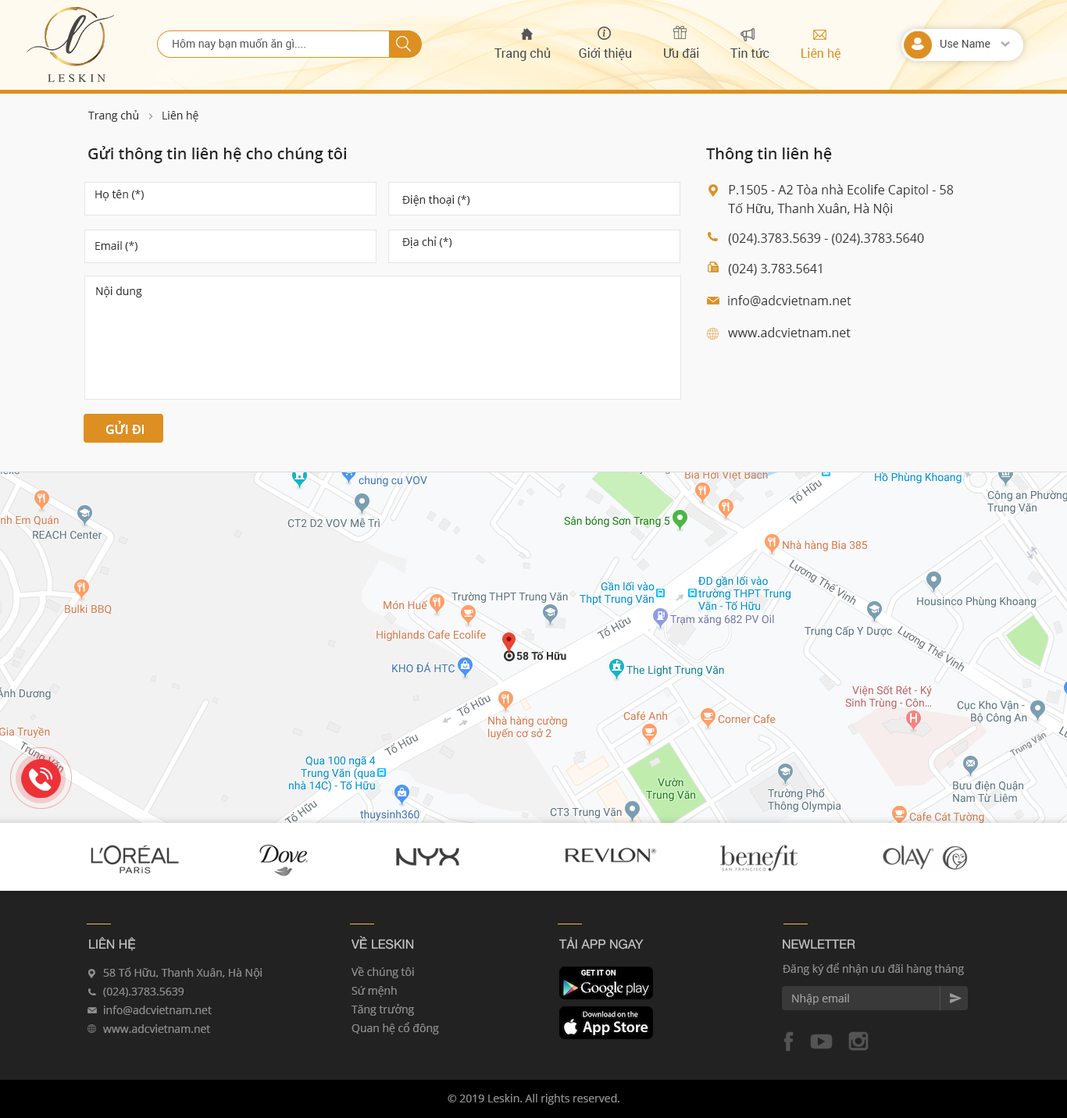
<style>
.page{position:relative;width:1067px;height:1118px;background:#f9f9f9}
.page>*{position:absolute;margin:0}
.t1{font:10.9px "Roboto-Regular";color:#595959}
.t2{font:10.9px "Roboto-Regular";color:#464646}
.t3{font:12.5px "Roboto-Regular";color:#464646}
.t4{font:12.5px "Roboto-Regular";color:#dd8f22}
.t5{font:10.9px "OpenSans";color:#333333}
.t6{font:15.6px "OpenSans-Semibold";color:#252525}
.t7{font:12.5px/18.7px "OpenSans";color:#333333}
.t8{font:12.5px "OpenSans";color:#333333}
.t9{font:12.5px "OpenSans-Semibold";color:#ffffff;text-transform:uppercase}
.t10{font:12.5px "HelveticaNeue";color:#c4c4c4;text-transform:uppercase}
.t11{font:10.9px "OpenSans";color:#8c8c8c}
.t12{font:10.9px/18.7px "OpenSans";color:#8c8c8c}
.t13{font:10.9px "OpenSans";color:#9c9c9c}
</style>
<div class="page">
<p class="t1" style="left:173px;top:38px;width:132px;height:12px">Hôm nay bạn muốn ăn gì....</p>
<p class="t2" style="left:939px;top:40px;width:51px;height:8px">Use Name</p>
<p class="t3" style="left:494px;top:48px;width:346px;height:13px">Trang chủ         Giới thiệu          Ưu đãi          Tin tức          <span class="t4">Liên hệ</span></p>
<p class="t5" style="left:88px;top:110px;width:110px;height:12px">Trang chủ        Liên hệ</p>
<p class="t6" style="left:88px;top:146px;width:259px;height:17px">Gửi thông tin liên hệ cho chúng tôi</p>
<p class="t6" style="left:706px;top:148px;width:126px;height:15px">Thông tin liên hệ</p>
<p class="t7" style="left:728px;top:184px;width:225px;height:31px">P.1505 - A2 Tòa nhà Ecolife Capitol - 58 Tố Hữu, Thanh Xuân, Hà Nội</p>
<p class="t5" style="left:95px;top:190px;width:49px;height:11px">Họ tên (*)</p>
<p class="t5" style="left:402px;top:195px;width:68px;height:11px">Điện thoại (*)</p>
<p class="t8" style="left:728px;top:233px;width:196px;height:12px">(024).3783.5639 - (024).3783.5640</p>
<p class="t5" style="left:95px;top:241px;width:42px;height:10px">Email (*)</p>
<p class="t5" style="left:402px;top:237px;width:50px;height:11px">Địa chỉ (*)</p>
<p class="t8" style="left:728px;top:264px;width:93px;height:12px">(024) 3.783.5641</p>
<p class="t5" style="left:96px;top:287px;width:46px;height:10px">Nội dung</p>
<p class="t8" style="left:728px;top:295px;width:123px;height:11px">info@adcvietnam.net</p>
<p class="t8" style="left:728px;top:327px;width:122px;height:10px">www.adcvietnam.net</p>
<p class="t9" style="left:105px;top:421px;width:39px;height:13px">Gửi đi</p>
<p class="t10" style="left:89px;top:937px;width:47px;height:14px">Liên hệ</p>
<p class="t10" style="left:351px;top:935px;width:63px;height:14px">về leskin</p>
<p class="t10" style="left:559px;top:937px;width:84px;height:12px">Tải App ngay</p>
<p class="t10" style="left:782px;top:939px;width:73px;height:10px">newletter</p>
<p class="t11" style="left:782px;top:963px;width:181px;height:12px">Đăng ký để nhận ưu đãi hàng tháng</p>
<p class="t12" style="left:103px;top:967px;width:159px;height:66px">58 Tố Hữu, Thanh Xuân, Hà Nội<br>(024).3783.5639<br>info@adcvietnam.net <br>www.adcvietnam.net</p>
<p class="t12" style="left:351px;top:967px;width:88px;height:68px">Về chúng tôi<br>Sứ mệnh<br>Tăng trưởng<br>Quan hệ cổ đông</p>
<p class="t13" style="left:792px;top:994px;width:57px;height:11px">Nhập email</p>
<p class="t11" style="left:447px;top:1094px;width:172px;height:11px">© 2019 Leskin. All rights reserved.</p>
</div>
